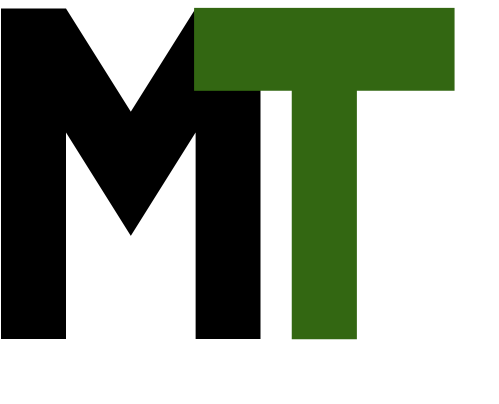
<style>
.page{position:relative;width:499px;height:404px;background:#ffffff}
.page>*{position:absolute;margin:0}
.t1{font:367px "NDLOGOS";color:#000000;scale:0.78 1}
.t2{font:367.9px "NDLOGOS";color:#346812;scale:0.78 1}
</style>
<div class="page">
<p class="t1" style="left:1px;top:8px;width:260px;height:331px">M</p>
<p class="t2" style="left:194px;top:7px;width:261px;height:333px">T</p>
</div>
